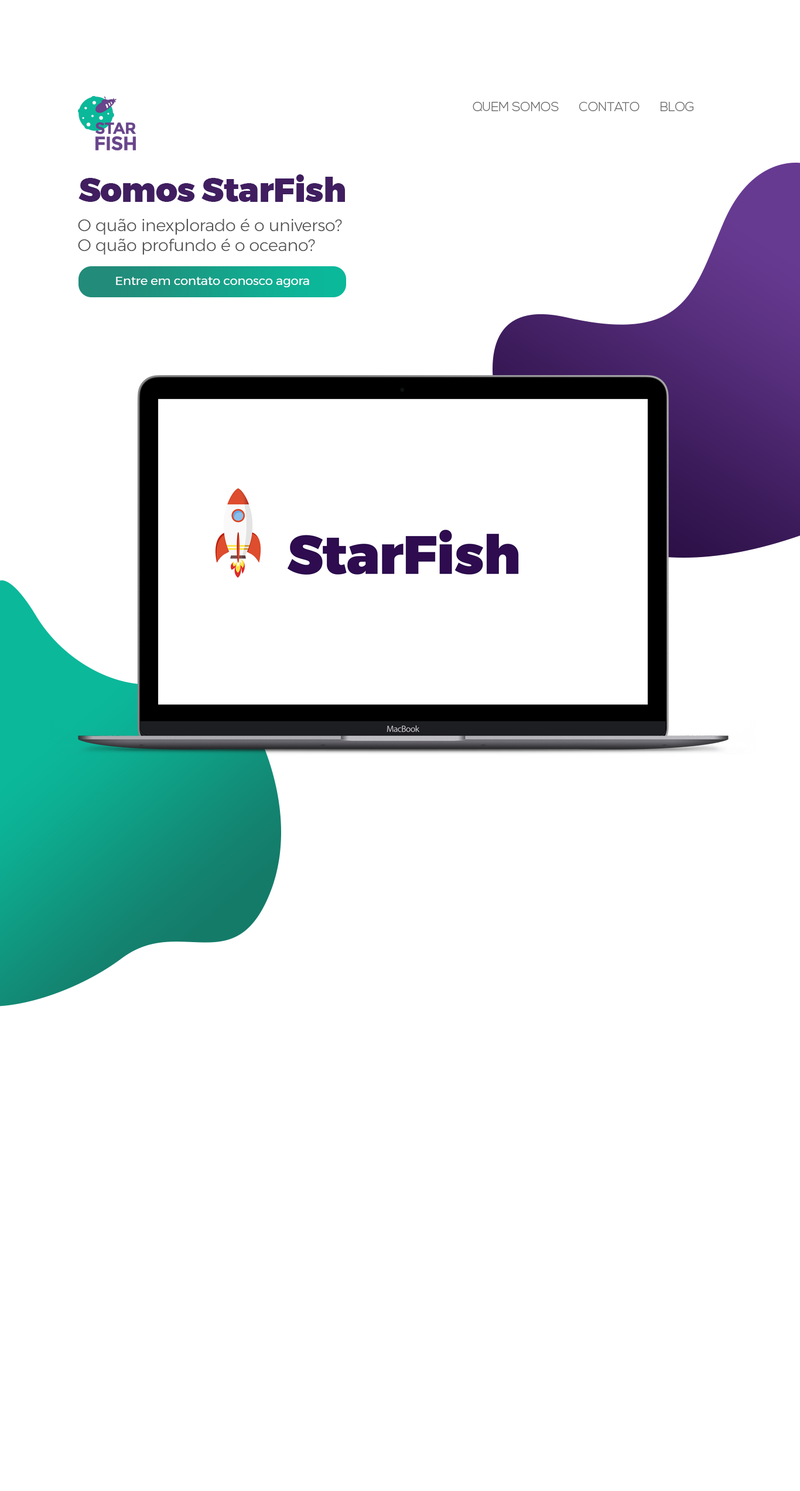
<style>
.page{position:relative;width:800px;height:1491px;background:#ffffff}
.page>*{position:absolute;margin:0}
.t1{font:12.7px "NexaLight";letter-spacing:-0.01em;color:#6a6969;text-transform:uppercase}
.t2{font:33.5px "Montserrat-Black";letter-spacing:-0.01em;color:#401e60}
.t3{font:16.7px/20px "Montserrat-Light";letter-spacing:-0.01em;color:#4e4e4f}
.t4{font:12.4px "Montserrat-Regular";letter-spacing:-0.01em;color:#ffffff}
</style>
<div class="page">
<p class="t1" style="left:472px;top:102px;width:221px;height:9px">Quem somos      contato      blog</p>
<p class="t2" style="left:78px;top:174px;width:267px;height:28px">Somos StarFish</p>
<p class="t3" style="left:78px;top:218px;width:264px;height:37px">O quão inexplorado é o universo?<br>O quão profundo é o oceano?</p>
<p class="t4" style="left:116px;top:277px;width:193px;height:10px">Entre em contato conosco agora</p>
</div>
